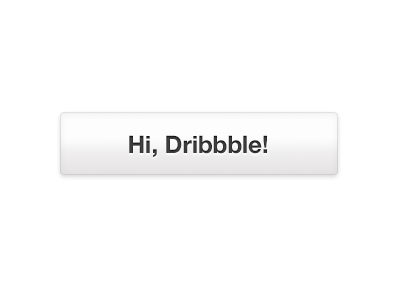
<style>
.page{position:relative;width:400px;height:300px;background:#ffffff}
.page>*{position:absolute;margin:0}
.t1{font:24px "HelveticaNeue-Bold";color:#403f3f}
</style>
<div class="page">
<p class="t1" style="left:129px;top:135px;width:138px;height:22px">Hi, Dribbble!</p>
</div>
